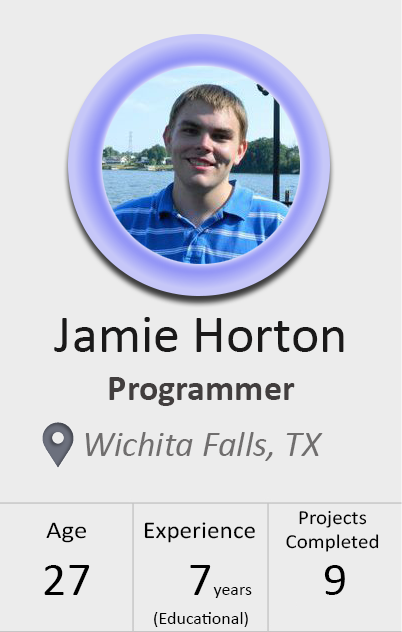
<style>
.page{position:relative;width:402px;height:632px;background:#ececec}
.page>*{position:absolute;margin:0}
.t1{font:54px "Calibri";color:#1a1919}
.t2{font:36px "Calibri-Bold";color:#423e3e}
.t3{font:36px "Calibri-Italic";color:#706e6e}
.t4{font:20px "Calibri";color:#000000;scale:1.06 1}
.t5{font:24px "Calibri";color:#000000;scale:1.11 1}
.t6{font:24px "Calibri";color:#000000;scale:1.06 1}
.t7{font:48px "Calibri";color:#000000}
.t8{font:18px "Calibri";color:#000000}
</style>
<div class="page">
<p class="t1" style="left:54px;top:317px;width:290px;height:35px">Jamie Horton</p>
<p class="t2" style="left:109px;top:377px;width:186px;height:29px">Programmer</p>
<p class="t3" style="left:85px;top:432px;width:238px;height:29px">Wichita Falls, TX</p>
<p class="t4" style="left:286px;top:510px;width:93px;height:42px;text-align:center">Projects <br>Completed</p>
<p class="t5" style="left:46px;top:522px;width:40px;height:21px">Age</p>
<p class="t6" style="left:144px;top:522px;width:111px;height:21px">Experience</p>
<p class="t7" style="left:44px;top:565px;width:46px;height:30px">27</p>
<p class="t7" style="left:190px;top:565px;width:21px;height:30px">7</p>
<p class="t7" style="left:324px;top:565px;width:21px;height:30px">9</p>
<p class="t8" style="left:213px;top:587px;width:39px;height:11px">years</p>
<p class="t8" style="left:154px;top:612px;width:94px;height:15px">(Educational)</p>
</div>
